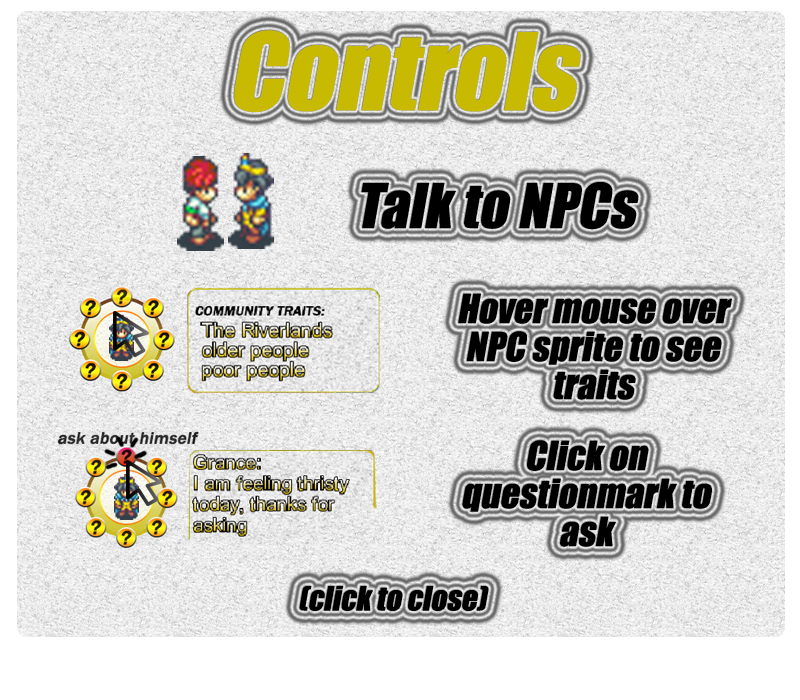
<style>
.page{position:relative;width:800px;height:700px}
.page>*{position:absolute;margin:0}
.t1{font:99px "Impact";color:#c7ba00;font-style:italic}
.t2{font:57px "Impact";color:#000000;font-style:italic}
.t3{font:37px/38px "Impact";color:#000000;font-style:italic}
.t4{font:31px "Impact";color:#000000;font-style:italic}
</style>
<div class="page">
<p class="t1" style="left:234px;top:30px;width:347px;height:82px">Controls</p>
<p class="t2" style="left:361px;top:182px;width:278px;height:48px">Talk to NPCs</p>
<p class="t3" style="left:458px;top:293px;width:274px;height:107px;text-align:center">Hover mouse over NPC sprite to see traits</p>
<p class="t3" style="left:462px;top:440px;width:250px;height:107px;text-align:center">Click on questionmark to ask</p>
<p class="t4" style="left:299px;top:586px;width:190px;height:25px">(click to close)</p>
</div>
